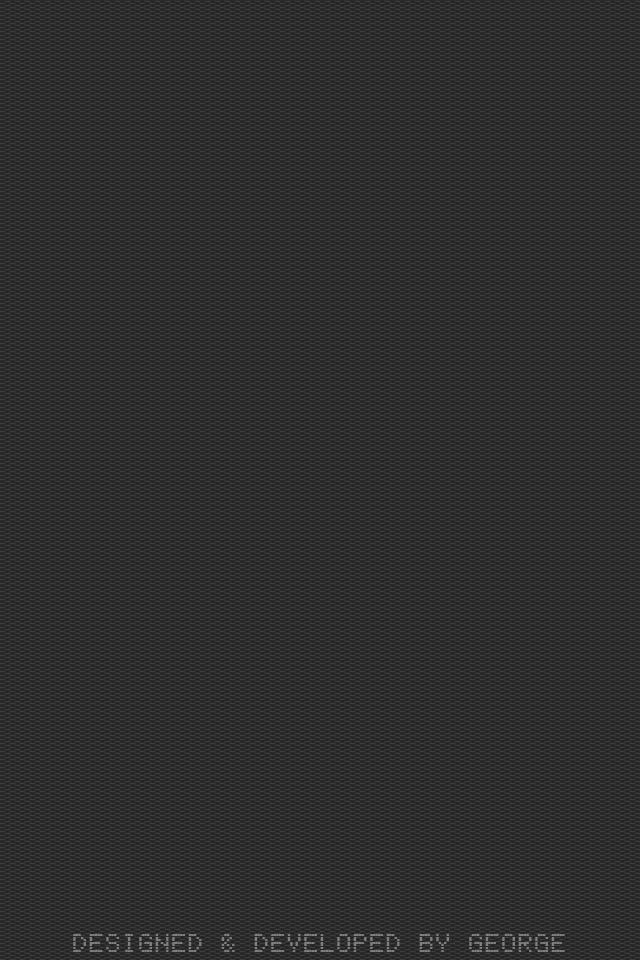
<style>
.page{position:relative;width:640px;height:960px;background:#2b2b2b}
.page>*{position:absolute;margin:0}
.t1{font:24px "ElectronicHighwaySign";letter-spacing:0.075em;color:#808080}
</style>
<div class="page">
<p class="t1" style="left:73px;top:934px;width:492px;height:18px">Designed &amp; developed by George</p>
</div>
